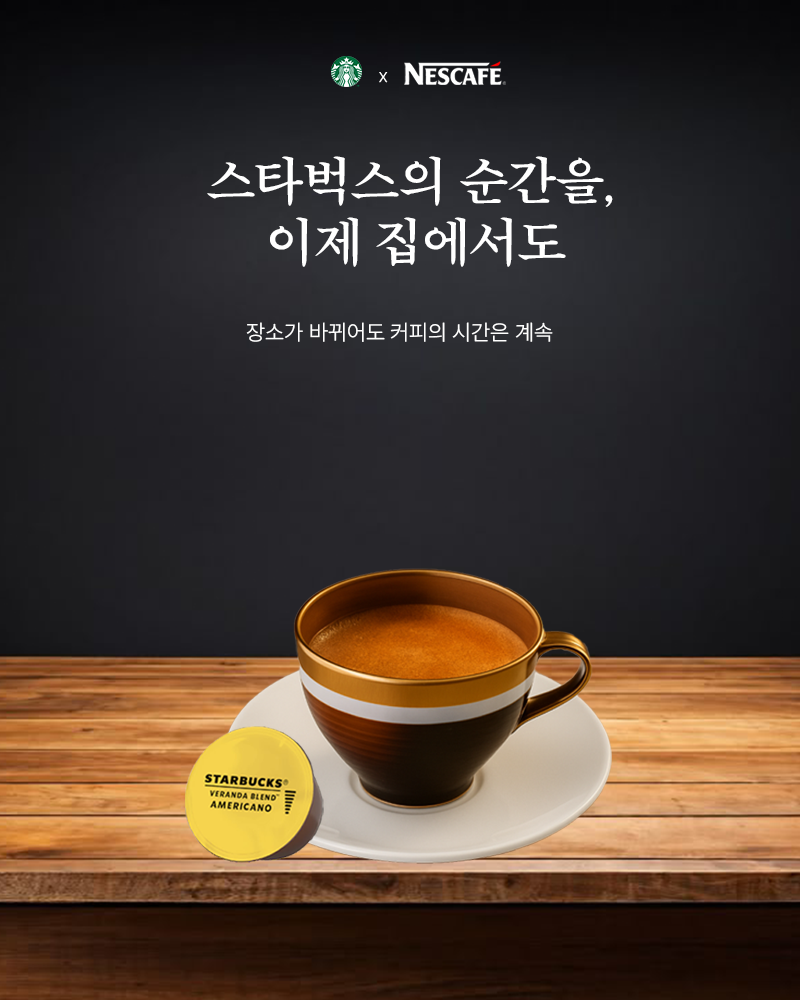
<style>
.page{position:relative;width:800px;height:1000px}
.page>*{position:absolute;margin:0}
.t1{font:14px "Pretendard-Light";color:#ffffff}
.t2{font:50px/61px "BookkMyungjo-Bd";color:#ffffff}
.t3{font:22px "Pretendard-Light";color:#ffffff}
</style>
<div class="page">
<p class="t1" style="left:379px;top:72px;width:9px;height:11px">X</p>
<p class="t2" style="left:207px;top:156px;width:406px;height:111px;text-align:center">스타벅스의 순간을,<br>이제 집에서도</p>
<p class="t3" style="left:246px;top:322px;width:307px;height:20px">장소가 바뀌어도 커피의 시간은 계속</p>
</div>
